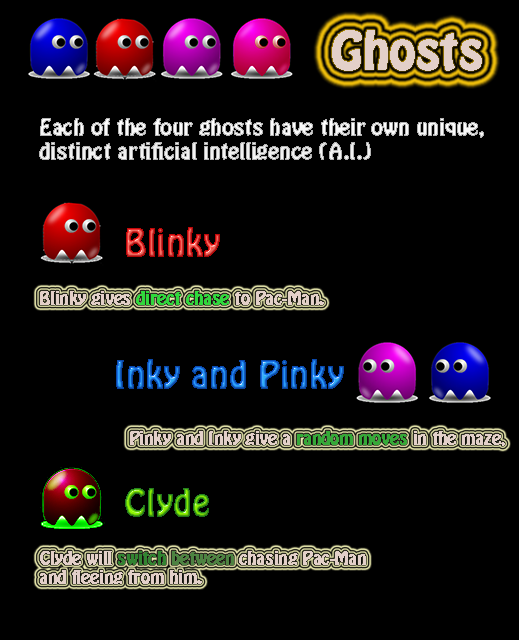
<style>
.page{position:relative;width:519px;height:640px;background:#000000}
.page>*{position:absolute;margin:0}
.t1{font:46.1px "HoboStd";color:#e3d0c9;font-weight:bold}
.t2{font:20px "HoboStd";font-weight:bold}
.t3{font:33.2px "HoboStd";font-weight:bold}
.t4{font:16px "HoboStd";color:#e3d0c9;font-weight:bold}
.t5{font:16px "HoboStd";color:#30d83c;font-weight:bold}
.t6{font:16px "HoboStd";color:#35a938;font-weight:bold}
.t7{font:16px "HoboStd";color:#328431;font-weight:bold}
.t8{font:16px "HoboStd";color:#4d8341;font-weight:bold}
</style>
<div class="page">
<p class="t1" style="left:332px;top:30px;width:150px;height:41px">Ghosts</p>
<p class="t2" style="left:39px;top:118px;width:445px;height:42px">Each of the four ghosts have their own unique, <br>distinct artificial intelligence (A.I.)</p>
<p class="t3" style="left:126px;top:227px;width:94px;height:30px">Blinky</p>
<p class="t4" style="left:40px;top:291px;width:284px;height:14px">Blinky gives <span class="t5">direct chase</span> to Pac-Man.</p>
<p class="t3" style="left:116px;top:359px;width:228px;height:30px">Inky and Pinky</p>
<p class="t4" style="left:130px;top:431px;width:375px;height:15px">Pinky and Inky give a<span class="t6"> random moves</span> in the maze,</p>
<p class="t3" style="left:125px;top:488px;width:84px;height:29px">Clyde</p>
<p class="t4" style="left:40px;top:551px;width:326px;height:33px">Clyde will <span class="t7">switch </span><span class="t8">between </span>chasing Pac-Man <br>and fleeing from him.</p>
</div>
